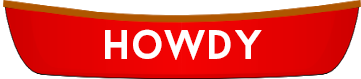
<style>
.page{position:relative;width:361px;height:79px}
.page>*{position:absolute;margin:0}
.t1{font:41.1px "BaronNeueBold";letter-spacing:0.02em;color:#fffefe}
</style>
<div class="page">
<p class="t1" style="left:105px;top:29px;width:157px;height:31px">Howdy</p>
</div>
